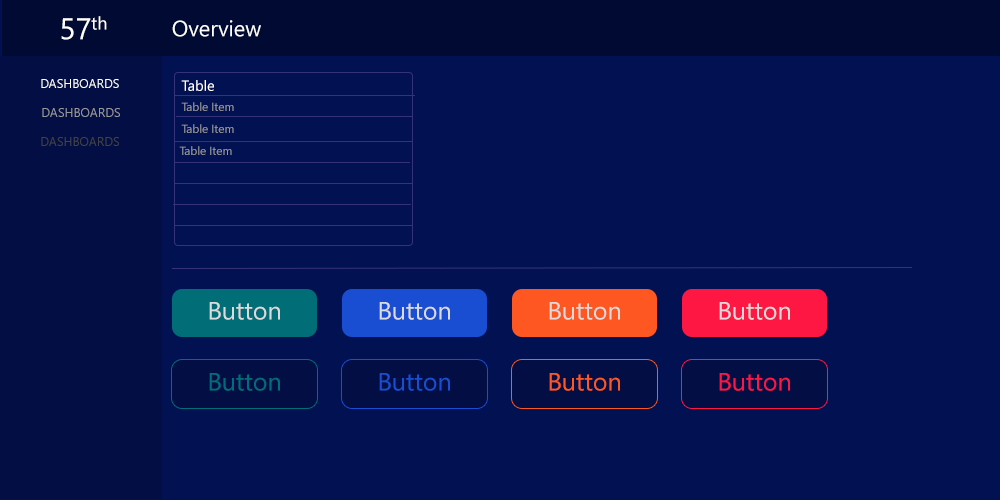
<style>
.page{position:relative;width:1000px;height:500px;background:#021151}
.page>*{position:absolute;margin:0}
.t1{font:18px "SegoeUI";color:#ffffff}
.t2{font:30px "SegoeUI";color:#ffffff}
.t3{font:22px "SegoeUI";color:#ffffff}
.t4{font:12.5px "SegoeUI";color:#ffffff}
.t5{font:14.6px "SegoeUI";color:#ffffff}
.t6{font:11.7px "SegoeUI";color:#999999}
.t7{font:12.5px "SegoeUI";color:#999999}
.t8{font:12.5px "SegoeUI";color:#424242}
.t9{font:25px "SegoeUI";color:#dbdbdb}
.t10{font:25px "SegoeUI";color:#006d77}
.t11{font:25px "SegoeUI";color:#194dd2}
.t12{font:25px "SegoeUI";color:#ff5722}
.t13{font:25px "SegoeUI";color:#ff1744}
</style>
<div class="page">
<p class="t1" style="left:91px;top:16px;width:16px;height:14px">th</p>
<p class="t2" style="left:61px;top:18px;width:30px;height:22px">57</p>
<p class="t3" style="left:172px;top:20px;width:89px;height:17px">Overview</p>
<p class="t4" style="left:41px;top:79px;width:78px;height:9px">DASHBOARDS</p>
<p class="t5" style="left:181px;top:80px;width:33px;height:11px">Table</p>
<p class="t6" style="left:181px;top:102px;width:53px;height:9px">Table Item</p>
<p class="t7" style="left:42px;top:108px;width:78px;height:9px">DASHBOARDS</p>
<p class="t6" style="left:181px;top:124px;width:53px;height:9px">Table Item</p>
<p class="t8" style="left:41px;top:137px;width:78px;height:9px">DASHBOARDS</p>
<p class="t6" style="left:179px;top:146px;width:53px;height:9px">Table Item</p>
<p class="t9" style="left:209px;top:302px;width:71px;height:18px">Button</p>
<p class="t9" style="left:379px;top:302px;width:71px;height:18px">Button</p>
<p class="t9" style="left:549px;top:302px;width:71px;height:18px">Button</p>
<p class="t9" style="left:719px;top:302px;width:71px;height:18px">Button</p>
<p class="t10" style="left:209px;top:373px;width:71px;height:18px">Button</p>
<p class="t11" style="left:379px;top:373px;width:71px;height:18px">Button</p>
<p class="t12" style="left:549px;top:373px;width:71px;height:18px">Button</p>
<p class="t13" style="left:719px;top:373px;width:71px;height:18px">Button</p>
</div>
